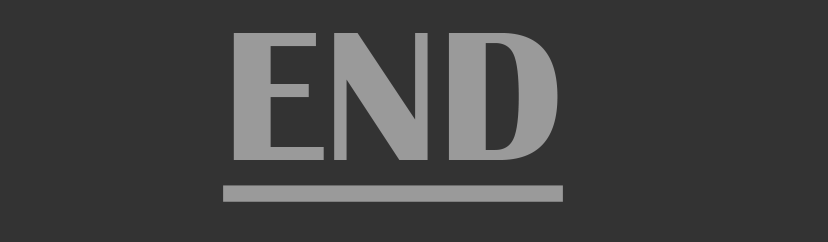
<style>
.page{position:relative;width:828px;height:242px;background:#333333}
.page>*{position:absolute;margin:0}
.t1{font:190px "BritannicBold";color:#9a9a9a;text-transform:uppercase;text-decoration:underline}
</style>
<div class="page">
<p class="t1" style="left:223px;top:33px;width:340px;height:169px">End</p>
</div>
